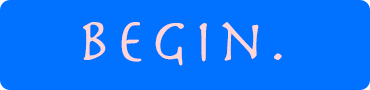
<style>
.page{position:relative;width:370px;height:90px;background:#0072ff}
.page>*{position:absolute;margin:0}
.t1{font:63px "Herculanum";letter-spacing:0.065em;color:#ffd6d6}
</style>
<div class="page">
<p class="t1" style="left:83px;top:22px;width:199px;height:44px">begin.</p>
</div>
